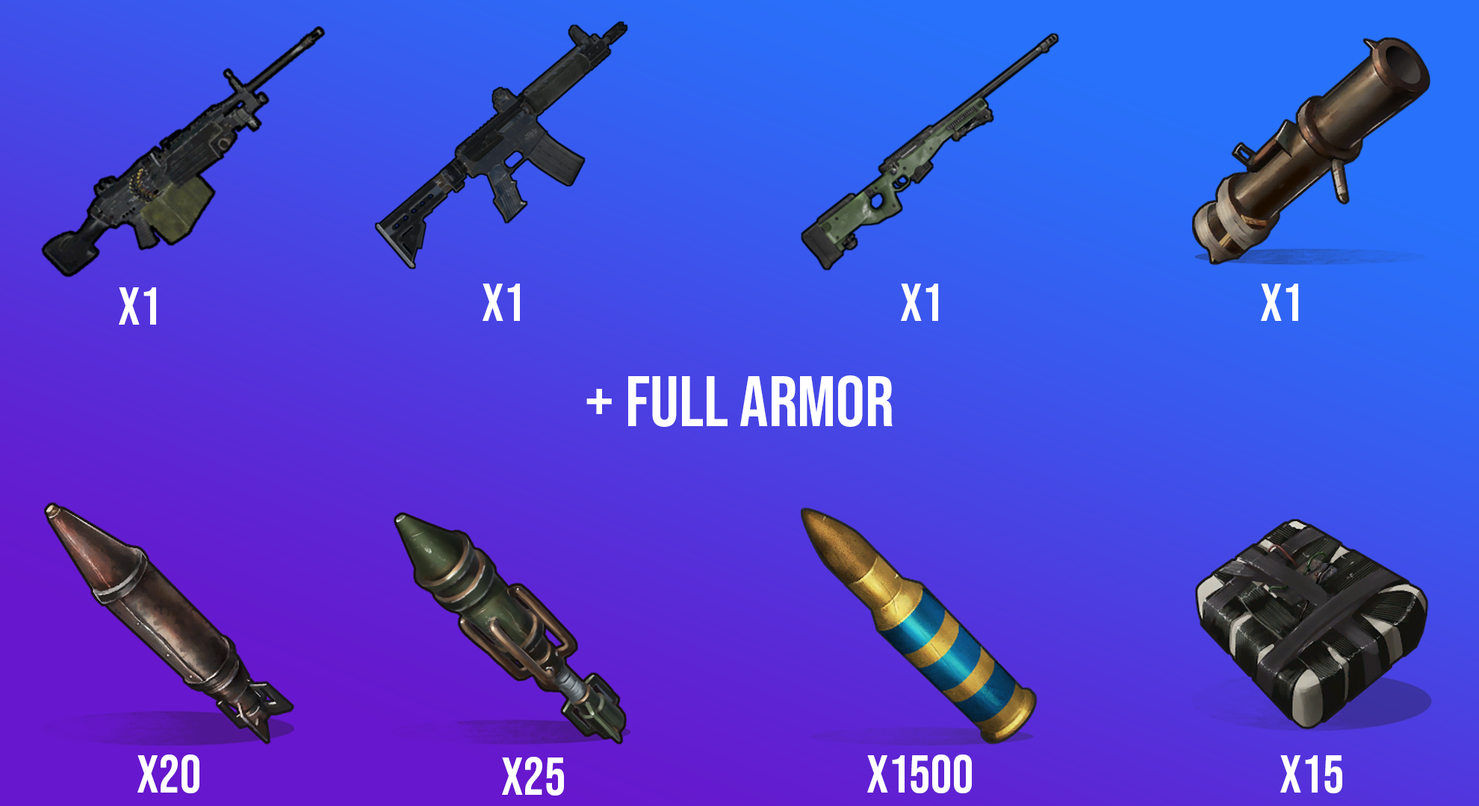
<style>
.page{position:relative;width:1479px;height:806px}
.page>*{position:absolute;margin:0}
.t1{font:53.5px "BebasNeue-Regular";color:#ffffff}
.t2{font:71.8px "BebasNeue-Regular";color:#ffffff}
</style>
<div class="page">
<p class="t1" style="left:119px;top:287px;width:37px;height:38px">x1</p>
<p class="t1" style="left:482px;top:284px;width:38px;height:37px">x1</p>
<p class="t1" style="left:901px;top:284px;width:37px;height:37px">x1</p>
<p class="t1" style="left:1261px;top:284px;width:37px;height:37px">x1</p>
<p class="t2" style="left:586px;top:376px;width:306px;height:51px">+ FULL ARMOR</p>
<p class="t1" style="left:137px;top:755px;width:62px;height:39px">x20</p>
<p class="t1" style="left:502px;top:757px;width:62px;height:39px">x25</p>
<p class="t1" style="left:867px;top:755px;width:105px;height:39px">x1500</p>
<p class="t1" style="left:1280px;top:756px;width:62px;height:38px">x15</p>
</div>
